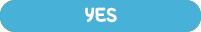
<style>
.page{position:relative;width:201px;height:32px;background:#48b1d8}
.page>*{position:absolute;margin:0}
.t1{font:21.2px "PLAYFULCHILD";color:#ffffff}
</style>
<div class="page">
<p class="t1" style="left:85px;top:7px;width:32px;height:16px">yes</p>
</div>
